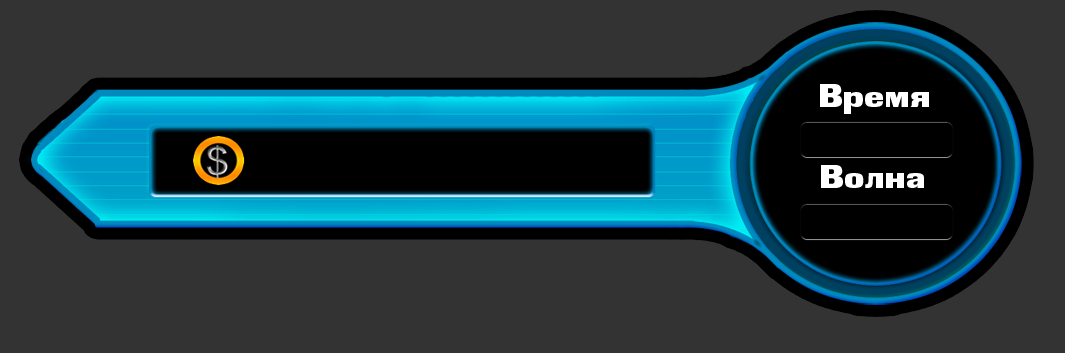
<style>
.page{position:relative;width:1065px;height:353px;background:#333333}
.page>*{position:absolute;margin:0}
.t1{font:32.6px "BlackGroteskC";color:#ffffff;scale:1.03 1}
.t2{font:32.6px "BlackGroteskC";color:#ffffff;scale:1.04 1}
</style>
<div class="page">
<p class="t1" style="left:820px;top:84px;width:109px;height:30px">Время</p>
<p class="t2" style="left:821px;top:165px;width:103px;height:23px">Волна</p>
</div>
